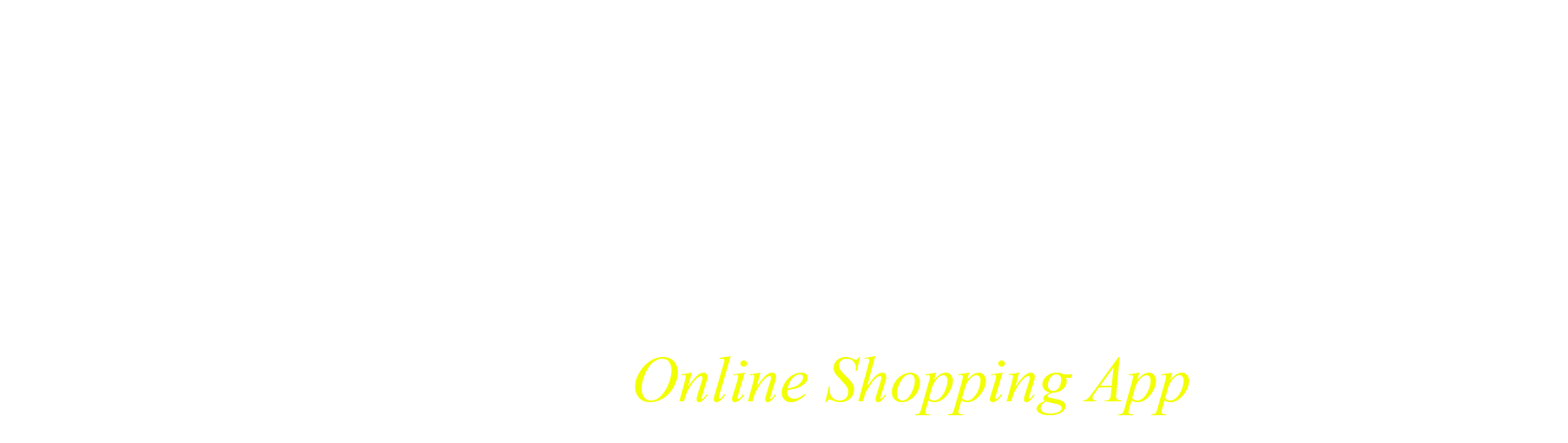
<style>
.page{position:relative;width:1568px;height:443px;background:#ffffff}
.page>*{position:absolute;margin:0}
.t1{font:65.1px "TimesNewRomanPS-ItalicMT";color:#f2ff00}
</style>
<div class="page">
<p class="t1" style="left:635px;top:356px;width:554px;height:59px">Online Shopping App</p>
</div>
